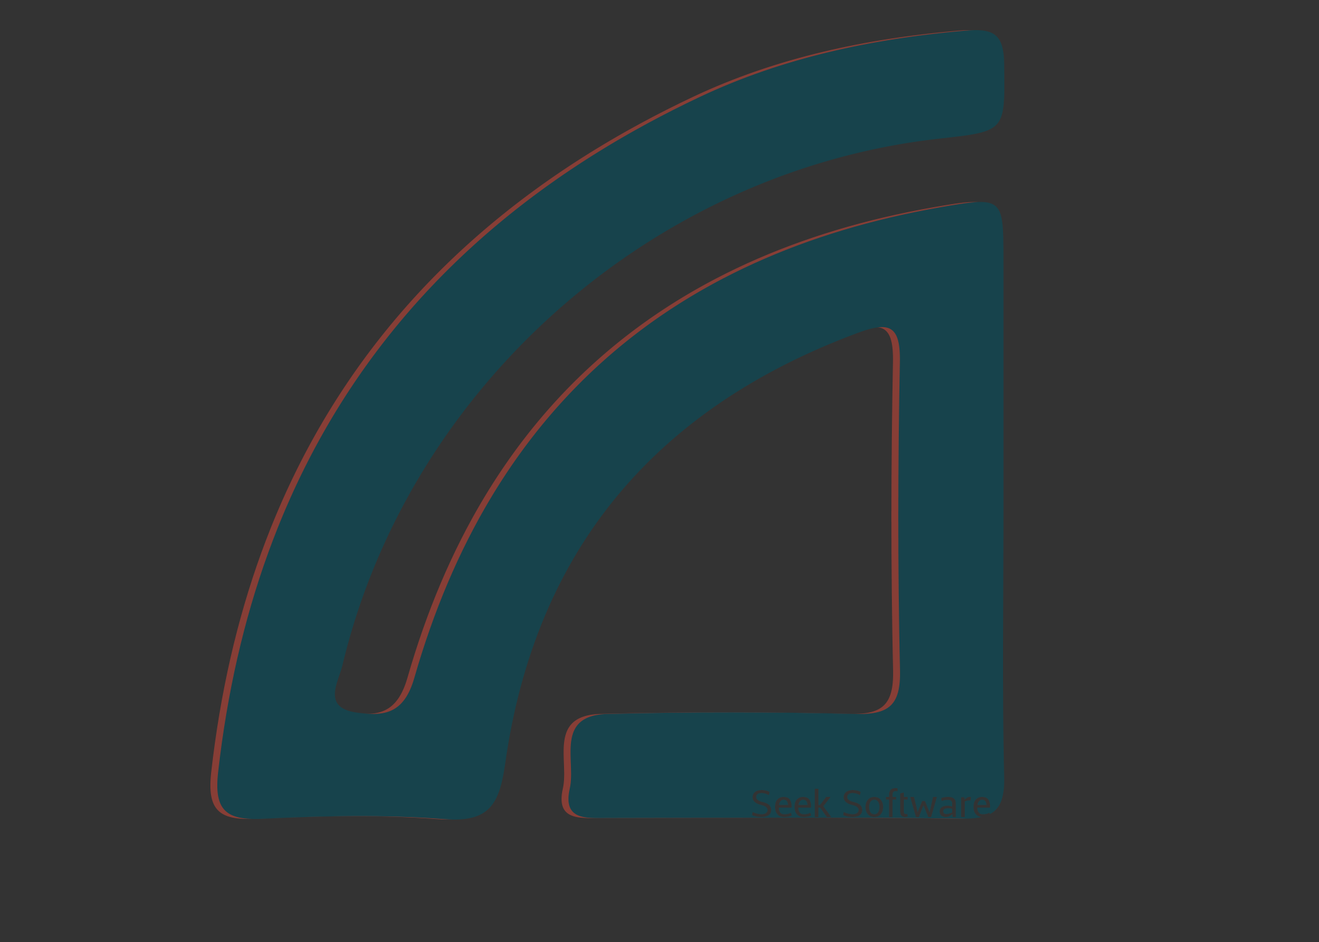
<style>
.page{position:relative;width:1319px;height:942px;background:#333333}
.page>*{position:absolute;margin:0}
.t1{font:9px "Centuma";color:#333333}
</style>
<div class="page">
<p class="t1" style="left:752px;top:789px;width:239px;height:28px">Seek Software</p>
</div>
